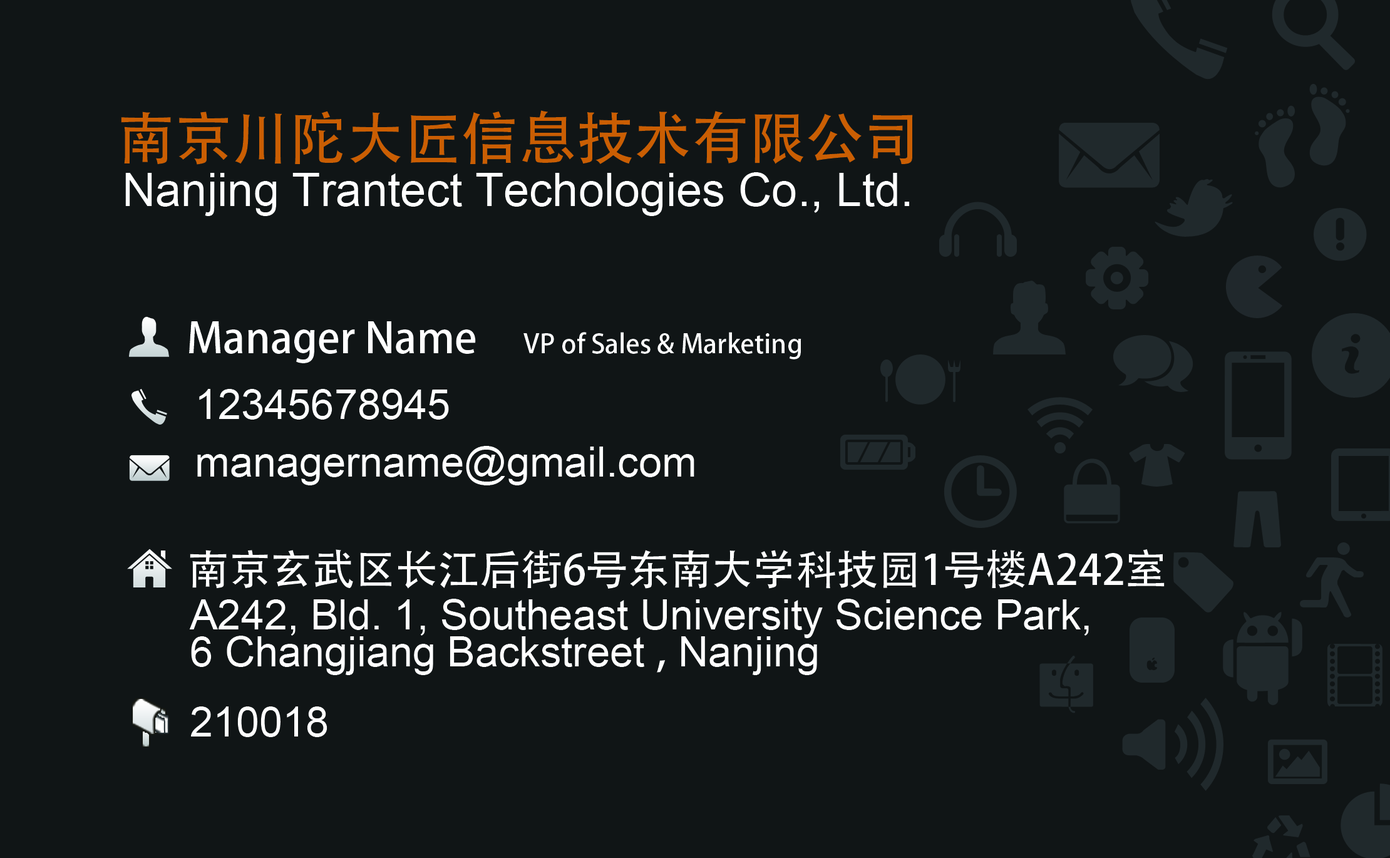
<style>
.page{position:relative;width:1390px;height:858px;background:#101516}
.page>*{position:absolute;margin:0}
.t1{font:57.4px "AdobeHeitiStd-Regular";color:#ca5e03}
.t2{font:46.4px "ArialMT";color:#ffffff}
.t3{font:26.1px "AdobeHeitiStd-Regular";color:#ffffff}
.t4{font:41.7px "AdobeHeitiStd-Regular";color:#ffffff}
.t5{font:41.7px/57.4px "ArialMT";color:#ffffff}
.t6{font:41.7px/35.7px "ArialMT";color:#ffffff}
.t7{font:41.7px/35.7px "AdobeHeitiStd-Regular";color:#ffffff}
</style>
<div class="page">
<p class="t1" style="left:121px;top:110px;width:792px;height:55px">南京川陀大匠信息技术有限公司</p>
<p class="t2" style="left:125px;top:172px;width:785px;height:44px">Nanjing Trantect Techologies Co., Ltd.</p>
<p class="t3" style="left:189px;top:321px;width:612px;height:42px"><span class="t4">Manager Name     </span>VP of Sales &amp; Marketing</p>
<p class="t5" style="left:197px;top:389px;width:497px;height:96px">12345678945<br>  managername@gmail.com</p>
<p class="t4" style="left:190px;top:549px;width:975px;height:40px">南京玄武区长江后街6号东南大学科技园1号楼A242室</p>
<p class="t6" style="left:189px;top:599px;width:900px;height:138px">A242, Bld. 1, Southeast University Science Park, <br>6 Changjiang Backstreet <span class="t7">,</span> Nanjing<br><br>210018</p>
</div>
